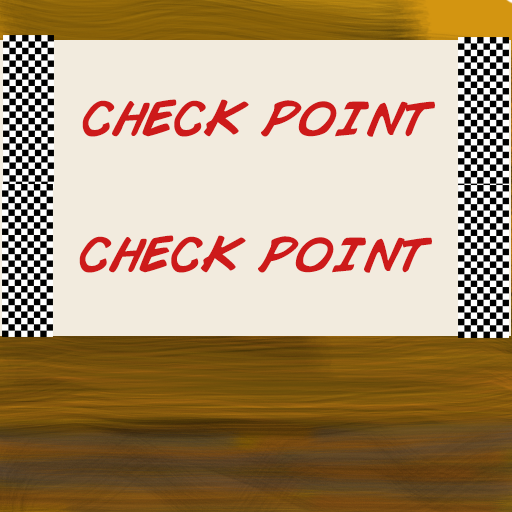
<style>
.page{position:relative;width:512px;height:512px;background:#f2ebde}
.page>*{position:absolute;margin:0}
.t1{font:48px "ComicBook";color:#cd1a1a}
</style>
<div class="page">
<p class="t1" style="left:82px;top:99px;width:353px;height:38px">CHECK POINT</p>
<p class="t1" style="left:79px;top:235px;width:353px;height:38px">CHECK POINT</p>
</div>
